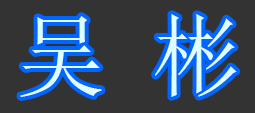
<style>
.page{position:relative;width:255px;height:113px;background:#333333}
.page>*{position:absolute;margin:0}
.t1{font:90px "SimSun";color:#dfffff}
</style>
<div class="page">
<p class="t1" style="left:20px;top:14px;width:217px;height:83px">吴 彬</p>
</div>
